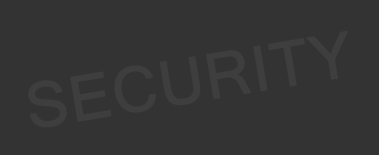
<style>
.page{position:relative;width:379px;height:155px;background:#333333}
.page>*{position:absolute;margin:0}
.t1{font:69.3px "Raavi";color:#3e3e3e;text-transform:uppercase;font-weight:bold}
</style>
<div class="page">
<p class="t1" style="left:28px;top:30px;width:320px;height:98px;rotate:-9deg">Security</p>
</div>
